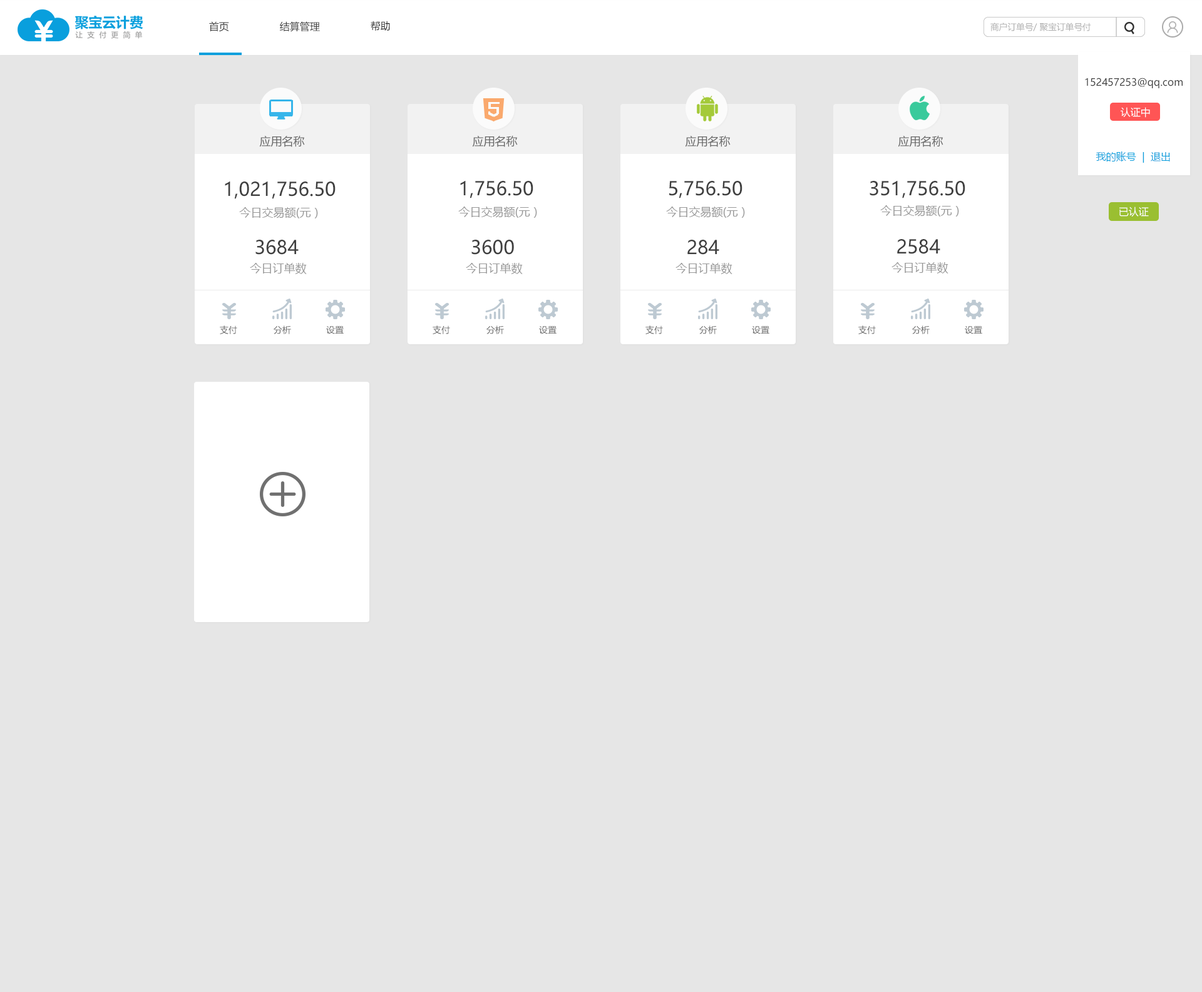
<style>
.page{position:relative;width:1202px;height:992px;background:#e6e6e6}
.page>*{position:absolute;margin:0}
.t1{font:10px "MicrosoftYaHei";color:#3f3f3f}
.t2{font:10px "MicrosoftYaHei";color:#222222}
.t3{font:8.8px "MicrosoftYaHei";color:#aeaeae}
.t4{font:10px "MicrosoftYaHei";color:#ffffff}
.t5{font:11.3px "MicrosoftYaHei";color:#666666}
.t6{font:10px "MicrosoftYaHei";color:#099fdd}
.t7{font:18.8px "MicrosoftYaHei";color:#3f3f3f}
.t8{font:11.3px "MicrosoftYaHei";color:#999999}
.t9{font:8.8px "MicrosoftYaHei";color:#666666}
</style>
<div class="page">
<p class="t1" style="left:209px;top:21px;width:20px;height:11px">首页</p>
<p class="t1" style="left:280px;top:21px;width:40px;height:11px">结算管理</p>
<p class="t2" style="left:371px;top:21px;width:19px;height:10px">帮助</p>
<p class="t3" style="left:990px;top:23px;width:101px;height:8px">商户订单号/ 聚宝订单号付款方名称</p>
<p class="t1" style="left:1085px;top:78px;width:97px;height:10px">152457253@qq.com</p>
<p class="t4" style="left:1120px;top:107px;width:30px;height:11px">认证中</p>
<p class="t5" style="left:259px;top:135px;width:46px;height:12px">应用名称</p>
<p class="t5" style="left:472px;top:135px;width:46px;height:12px">应用名称</p>
<p class="t5" style="left:685px;top:135px;width:46px;height:12px">应用名称</p>
<p class="t5" style="left:898px;top:135px;width:45px;height:12px">应用名称</p>
<p class="t6" style="left:1095px;top:151px;width:75px;height:12px">我的账号  |  退出</p>
<p class="t7" style="left:225px;top:182px;width:111px;height:17px">1,021,756.50</p>
<p class="t7" style="left:460px;top:181px;width:73px;height:17px">1,756.50</p>
<p class="t7" style="left:669px;top:181px;width:73px;height:17px">5,756.50</p>
<p class="t7" style="left:869px;top:181px;width:96px;height:17px">351,756.50</p>
<p class="t8" style="left:239px;top:207px;width:79px;height:11px">今日交易额(元）</p>
<p class="t8" style="left:458px;top:207px;width:79px;height:11px">今日交易额(元）</p>
<p class="t8" style="left:666px;top:207px;width:79px;height:11px">今日交易额(元）</p>
<p class="t8" style="left:880px;top:205px;width:79px;height:12px">今日交易额(元）</p>
<p class="t4" style="left:1119px;top:207px;width:30px;height:10px">已认证</p>
<p class="t7" style="left:255px;top:240px;width:44px;height:15px">3684</p>
<p class="t7" style="left:471px;top:240px;width:43px;height:15px">3600</p>
<p class="t7" style="left:687px;top:240px;width:32px;height:15px">284</p>
<p class="t7" style="left:897px;top:239px;width:43px;height:15px">2584</p>
<p class="t8" style="left:250px;top:263px;width:57px;height:11px">今日订单数</p>
<p class="t8" style="left:466px;top:263px;width:57px;height:11px">今日订单数</p>
<p class="t8" style="left:675px;top:263px;width:57px;height:11px">今日订单数</p>
<p class="t8" style="left:891px;top:262px;width:57px;height:12px">今日订单数</p>
<p class="t9" style="left:220px;top:326px;width:17px;height:8px">支付</p>
<p class="t9" style="left:274px;top:326px;width:17px;height:8px">分析</p>
<p class="t9" style="left:326px;top:326px;width:18px;height:8px">设置</p>
<p class="t9" style="left:433px;top:326px;width:17px;height:8px">支付</p>
<p class="t9" style="left:486px;top:326px;width:18px;height:8px">分析</p>
<p class="t9" style="left:539px;top:326px;width:17px;height:8px">设置</p>
<p class="t9" style="left:645px;top:326px;width:18px;height:8px">支付</p>
<p class="t9" style="left:699px;top:326px;width:18px;height:8px">分析</p>
<p class="t9" style="left:752px;top:326px;width:17px;height:8px">设置</p>
<p class="t9" style="left:858px;top:326px;width:18px;height:8px">支付</p>
<p class="t9" style="left:912px;top:326px;width:18px;height:8px">分析</p>
<p class="t9" style="left:965px;top:326px;width:17px;height:8px">设置</p>
</div>
